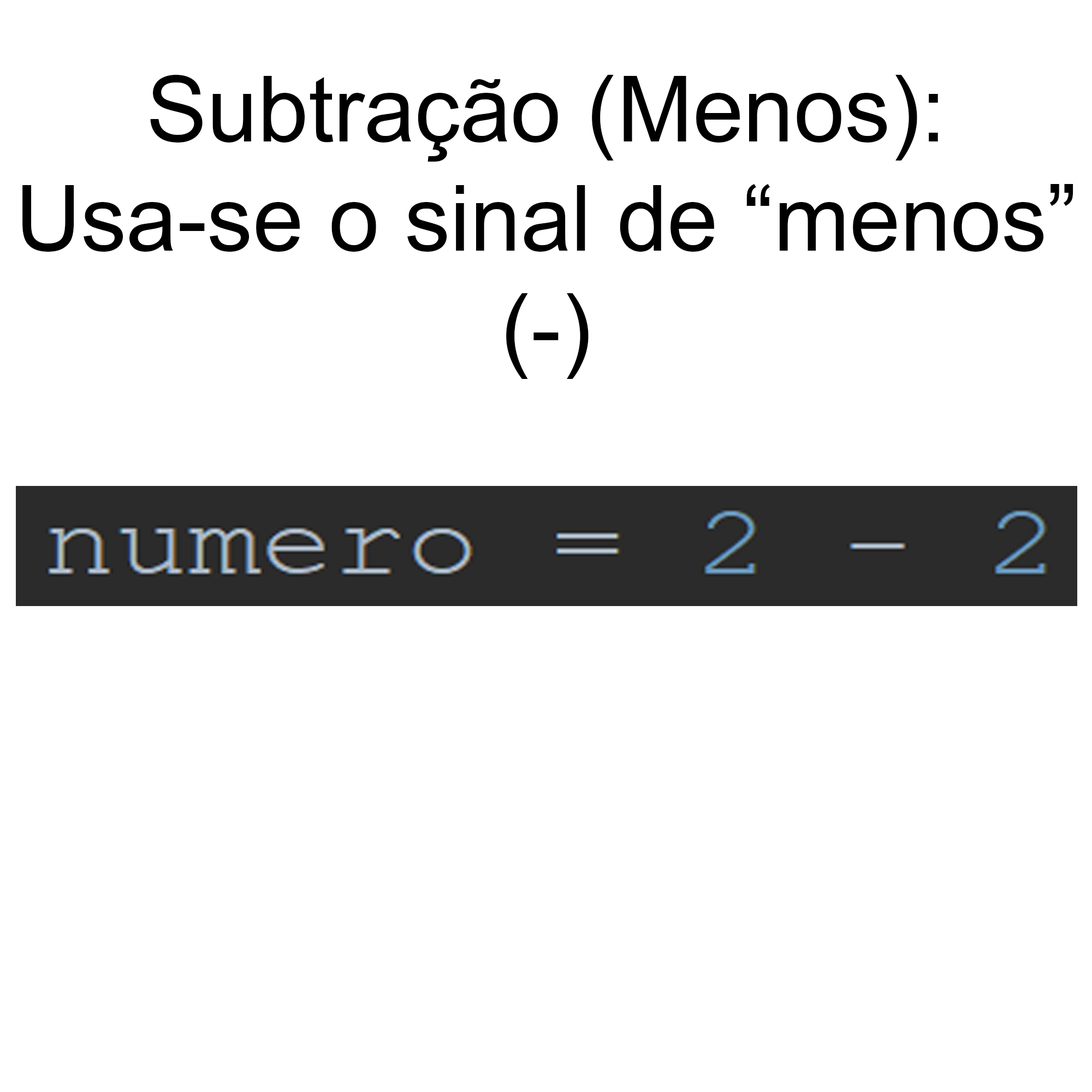
<style>
.page{position:relative;width:1092px;height:1092px;background:#ffffff}
.page>*{position:absolute;margin:0}
.t1{font:91px "ArialMT";color:#000000}
</style>
<div class="page">
<p class="t1" style="left:22px;top:75px;width:1051px;height:304px;text-align:center">Subtração (Menos):<br>Usa-se o sinal de “menos”<br>(-)</p>
</div>
